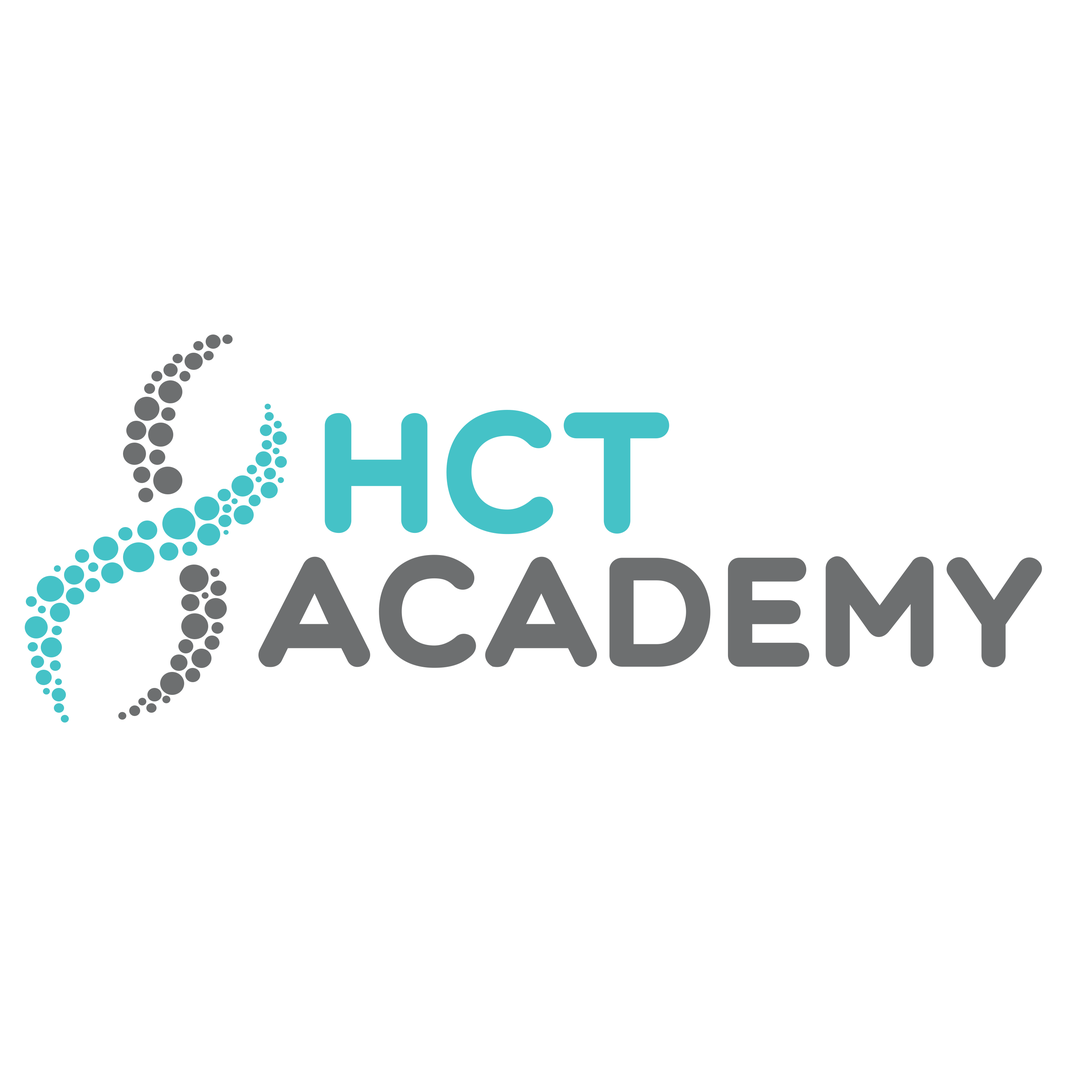
<style>
.page{position:relative;width:1092px;height:1092px;background:#ffffff}
.page>*{position:absolute;margin:0}
.t1{font:166.8px "Multicolore";color:#45c2c7;font-weight:bold}
.t2{font:151.7px "Multicolore";color:#6d6f70;font-weight:bold}
</style>
<div class="page">
<p class="t1" style="left:325px;top:410px;width:344px;height:124px">HCT</p>
<p class="t2" style="left:258px;top:555px;width:784px;height:113px">ACADEMY</p>
</div>
